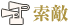
<style>
.page{position:relative;width:69px;height:27px;background:#ffffff}
.page>*{position:absolute;margin:0}
.t1{font:18px "RyuminPro-Heavy";color:#ae9442}
</style>
<div class="page">
<p class="t1" style="left:33px;top:4px;width:35px;height:18px">索敵</p>
</div>
